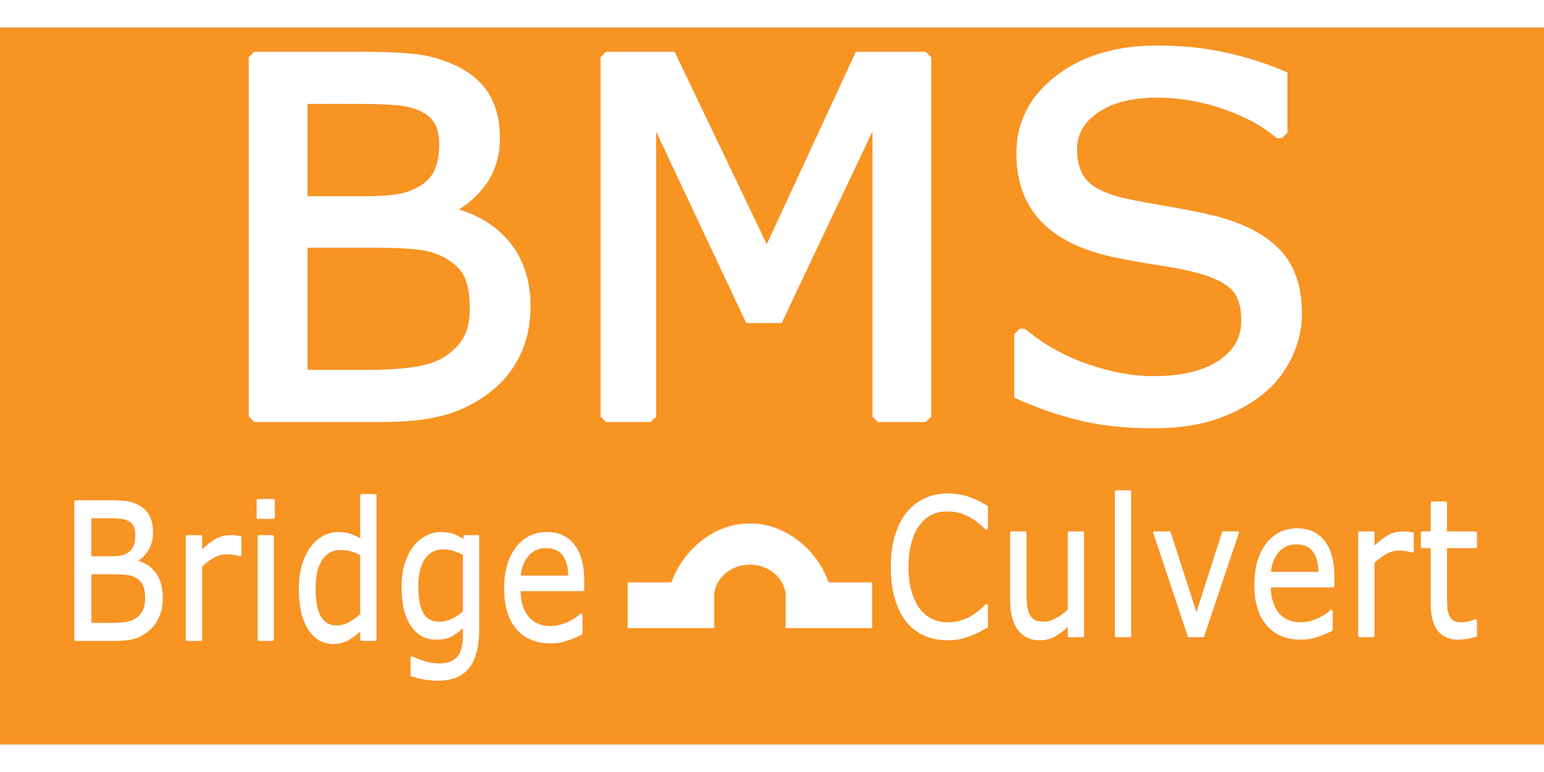
<style>
.page{position:relative;width:1544px;height:772px;background:#f79422}
.page>*{position:absolute;margin:0}
.t1{font:493.8px "MSReferenceSansSerif";color:#ffffff;font-weight:bold}
.t2{font:191.2px "MSReferenceSansSerif";color:#ffffff;font-weight:bold;scale:0.83 1}
</style>
<div class="page">
<p class="t1" style="left:248px;top:45px;width:1055px;height:383px">BMS</p>
<p class="t2" style="left:74px;top:494px;width:511px;height:187px">Bridge</p>
<p class="t2" style="left:890px;top:490px;width:588px;height:151px">Culvert</p>
</div>
